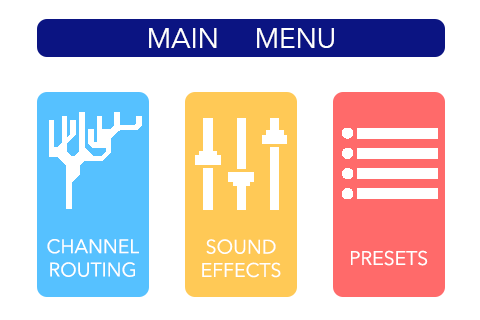
<style>
.page{position:relative;width:480px;height:320px;background:#ffffff}
.page>*{position:absolute;margin:0}
.t1{font:27.8px "AvenirNext-Regular";color:#ffffff}
.t2{font:19.4px "AvenirNext-Regular";color:#ffffff}
</style>
<div class="page">
<p class="t1" style="left:149px;top:28px;width:185px;height:20px">MAIN MENU</p>
<p class="t2" style="left:47px;top:239px;width:92px;height:38px;text-align:center">CHANNEL<br>ROUTING</p>
<p class="t2" style="left:202px;top:239px;width:79px;height:39px;text-align:center">SOUND<br>EFFECTS</p>
<p class="t2" style="left:351px;top:250px;width:77px;height:16px">PRESETS</p>
</div>
